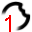
<style>
.page{position:relative;width:32px;height:32px;background:#ffffff}
.page>*{position:absolute;margin:0}
.t1{font:24px "ArialMT";color:#fb0000}
</style>
<div class="page">
<p class="t1" style="left:5px;top:15px;width:6px;height:17px">1</p>
</div>
